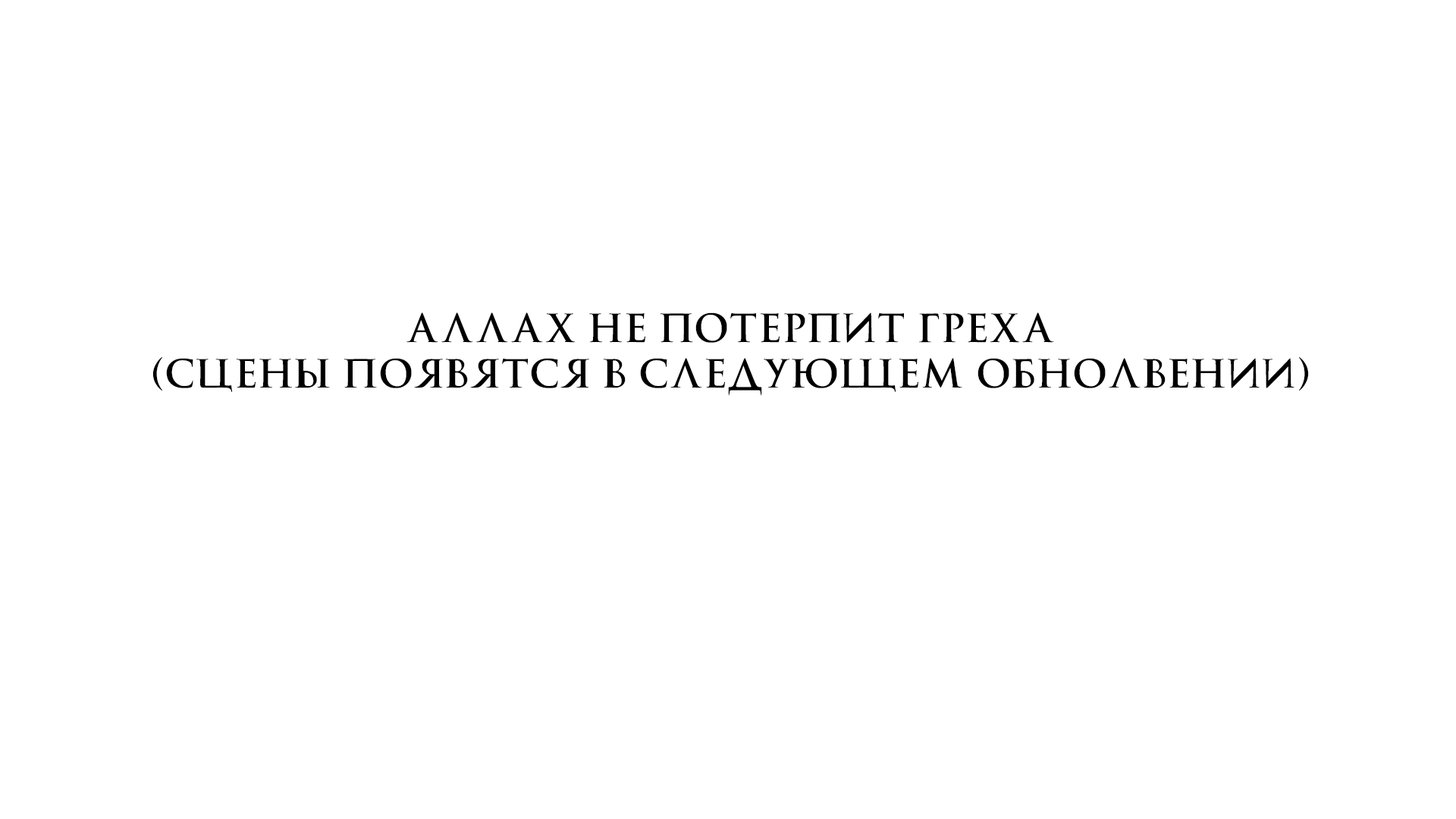
<style>
.page{position:relative;width:1456px;height:819px;background:#ffffff}
.page>*{position:absolute;margin:0}
.t1{font:37.9px "Trajan-RU";color:#000000;text-transform:uppercase}
</style>
<div class="page">
<p class="t1" style="left:152px;top:312px;width:1157px;height:84px;text-align:center">Аллах не потерпит греха<br>(сцены появятся в следующем обнолвении)</p>
</div>
